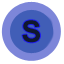
<style>
.page{position:relative;width:64px;height:64px;background:#ffffff}
.page>*{position:absolute;margin:0}
.t1{font:30px "Arial-BoldMT";color:#10182e}
</style>
<div class="page">
<p class="t1" style="left:22px;top:20px;width:18px;height:23px">S</p>
</div>
